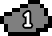
<style>
.page{position:relative;width:52px;height:36px;background:#7f7f7f}
.page>*{position:absolute;margin:0}
.t1{font:19.4px "ComicSansMS-Bold";color:#ffffff}
</style>
<div class="page">
<p class="t1" style="left:24px;top:12px;width:8px;height:15px">1</p>
</div>
